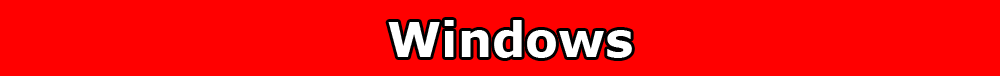
<style>
.page{position:relative;width:1000px;height:76px;background:#ff0000}
.page>*{position:absolute;margin:0}
.t1{font:48px "Verdana-Bold";color:#ffffff}
.t2{font:48px "Verdana-Bold"}
</style>
<div class="page">
<p class="t1" style="left:388px;top:20px;width:244px;height:38px">Windows</p>
<p class="t2" style="left:403px;top:20px;width:240px;height:38px">Nintendo</p>
</div>
